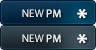
<style>
.page{position:relative;width:96px;height:50px}
.page>*{position:absolute;margin:0}
.t1{font:11px "MyriadPro-Regular";color:#ffffff}
.t2{font:11px "MyriadPro-Regular";color:#ffffff;font-weight:bold}
.t3{font:26px "MyriadPro-Regular";color:#ffffff;font-weight:bold}
</style>
<div class="page">
<p class="t1" style="left:22px;top:9px;width:39px;height:9px">NEW <span class="t2">PM</span></p>
<p class="t3" style="left:77px;top:9px;width:10px;height:10px">*</p>
<p class="t1" style="left:22px;top:34px;width:39px;height:9px">NEW <span class="t2">PM</span></p>
<p class="t3" style="left:77px;top:34px;width:10px;height:10px">*</p>
</div>
